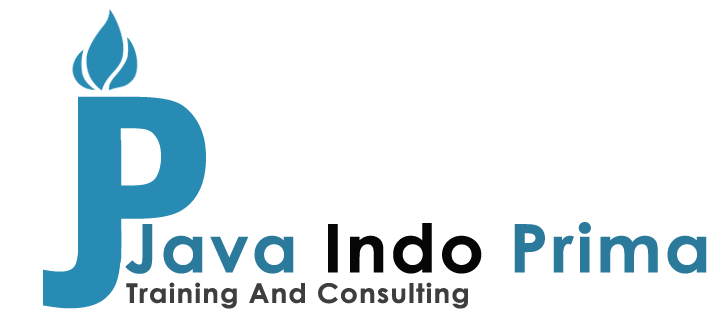
<style>
.page{position:relative;width:728px;height:325px;background:#ffffff}
.page>*{position:absolute;margin:0}
.t1{font:67.2px "CenturyGothic-Bold";letter-spacing:0.04em;color:#2b7a9b;scale:1.04 1}
.t2{font:67.2px "CenturyGothic-Bold";letter-spacing:0.04em;color:#060606;scale:1.04 1}
.t3{font:26.9px "CenturyGothic-Bold";letter-spacing:0.04em;color:#3f3f3f;scale:1.04 1}
</style>
<div class="page">
<p class="t1" style="left:125px;top:222px;width:582px;height:52px">Java <span class="t2">Indo</span> Prima</p>
<p class="t3" style="left:126px;top:282px;width:342px;height:27px">Training And Consulting</p>
</div>
